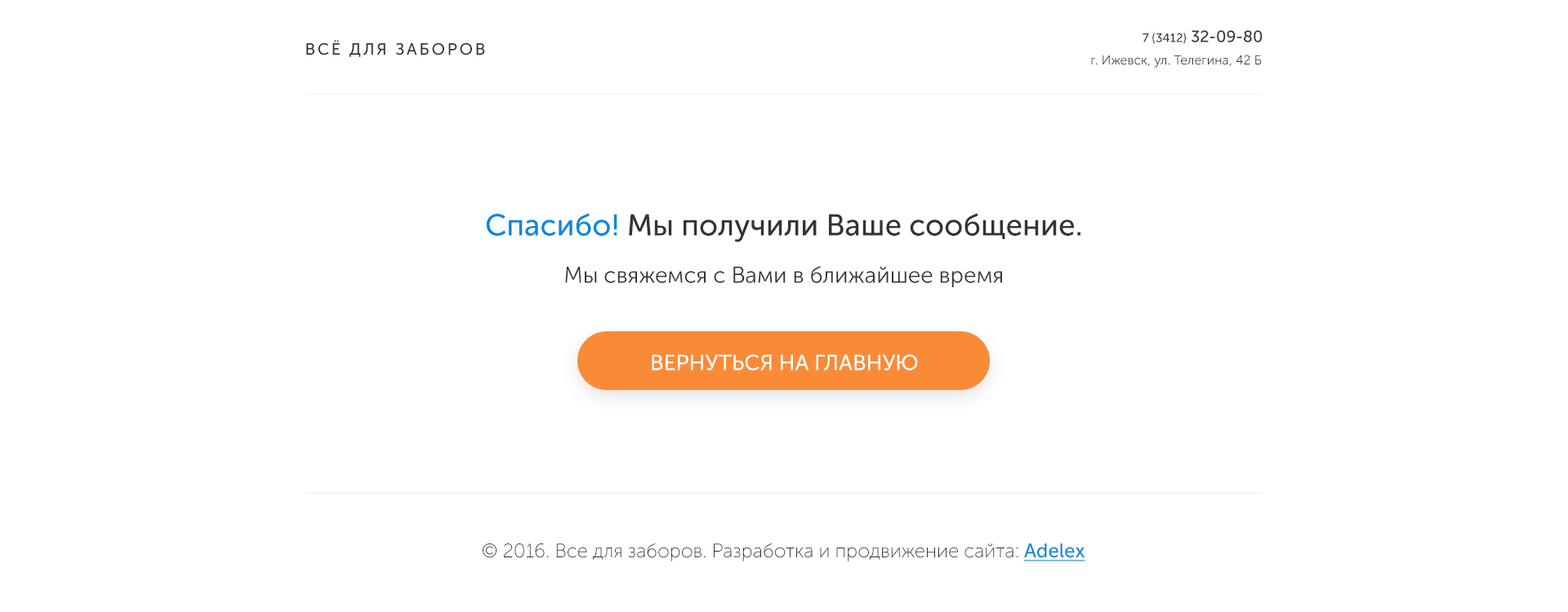
<style>
.page{position:relative;width:1568px;height:612px;background:#ffffff}
.page>*{position:absolute;margin:0}
.t1{font:16.3px "MuseoSansCyrl-500";letter-spacing:0.14em;color:#333333}
.t2{font:12.2px "MuseoSansCyrl-500";color:#333333}
.t3{font:16.3px "MuseoSansCyrl-500";color:#333333}
.t4{font:13.1px "MuseoSansCyrl-300";color:#333333}
.t5{font:22.9px/47.4px "MuseoSansCyrl-300";color:#333333}
.t6{font:30.2px/47.4px "MuseoSansCyrl-500";color:#0086e4}
.t7{font:30.2px/47.4px "MuseoSansCyrl-500";color:#333333}
.t8{font:21.7px "MuseoSansCyrl-500";color:#ffffff}
.t9{font:19.6px "MuseoSansCyrl-100";color:#333333}
.t10{font:19.6px "MuseoSansCyrl-500";color:#0086e4;text-decoration:underline}
</style>
<div class="page">
<p class="t1" style="left:306px;top:40px;width:179px;height:17px">ВСЁ ДЛЯ ЗАБОРОВ</p>
<p class="t2" style="left:1143px;top:30px;width:120px;height:13px">7 (3412)<span class="t3"> 32-09-80</span></p>
<p class="t4" style="left:1091px;top:55px;width:171px;height:13px">г. Ижевск, ул. Телегина, 42 Б</p>
<p class="t5" style="left:486px;top:213px;width:594px;height:74px;text-align:center"><span class="t6">Спасибо!</span><span class="t7"> Мы получили Ваше сообщение.<br></span>Мы свяжемся с Вами в ближайшее время</p>
<p class="t8" style="left:652px;top:354px;width:266px;height:17px">ВЕРНУТЬСЯ НА ГЛАВНУЮ</p>
<p class="t9" style="left:483px;top:543px;width:602px;height:19px">© 2016. Все для заборов. Разработка и продвижение сайта: <span class="t10">Adelex</span></p>
</div>
